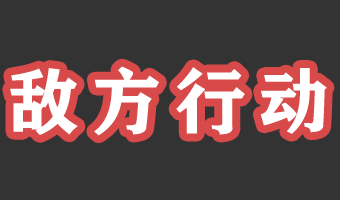
<style>
.page{position:relative;width:340px;height:200px;background:#333333}
.page>*{position:absolute;margin:0}
.t1{font:72px "FZCHSJW--GB1-0";letter-spacing:0.16em;color:#ffffff}
</style>
<div class="page">
<p class="t1" style="left:10px;top:66px;width:317px;height:70px">敌方行动</p>
</div>
